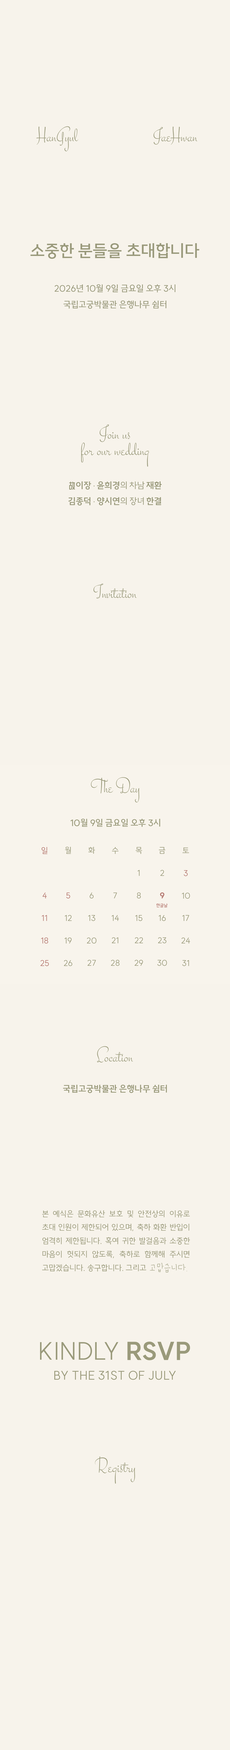
<style>
.page{position:relative;width:230px;height:1750px;background:#f7f3eb}
.page>*{position:absolute;margin:0}
.t1{font:20.3px "Stalemate-Regular";color:#99997b}
.t2{font:17.1px "SUITE-SemiBold";color:#99997b}
.t3{font:9px/16.2px "SUITE-Medium";color:#99997b}
.t4{font:20.3px/16.2px "Stalemate-Regular";color:#99997b}
.t5{font:9px/15.8px "SUITE-Bold";color:#99997b}
.t6{font:8.6px/15.8px "WD-XLLubrifontSC-Regular";color:#99997b}
.t7{font:7.2px/15.8px "WD-XLLubrifontSC-Regular";color:#99997b}
.t8{font:9px/15.8px "SUITE-Regular";color:#99997b}
.t9{font:20.3px "Stalemate-Regular";color:#9a9a7b}
.t10{font:9px "SUITE-SemiBold";color:#9a9a7b}
.t11{font:8.1px/22.5px "SUITE-Regular";color:#b57971}
.t12{font:8.1px/22.5px "SUITE-Regular";color:#9a9a7b}
.t13{font:8.1px/22.5px "SUITE-ExtraBold";color:#9a9a7b}
.t14{font:4.5px "SUITE-Regular";color:#a45a52}
.t15{font:9px "SUITE-Bold";color:#9a9a7b}
.t16{font:8.1px/13.5px "SUITE-Regular";color:#9a9a7b}
.t17{font:24.3px "SUITE-Light";color:#9a9a7b}
.t18{font:24.3px "SUITE-ExtraBold";color:#9a9a7b}
.t19{font:12.2px "SUITE-Regular";color:#9a9a7b}
</style>
<div class="page">
<p class="t1" style="left:36px;top:126px;width:161px;height:25px">HanGyul                      JaeHwan</p>
<p class="t2" style="left:30px;top:243px;width:169px;height:16px">소중한 분들을 초대합니다</p>
<p class="t3" style="left:54px;top:284px;width:121px;height:25px;text-align:center">2026년 10월 9일 금요일 오후 3시<br>국립고궁박물관 은행나무 쉼터</p>
<p class="t4" style="left:81px;top:424px;width:68px;height:43px;text-align:center">Join us<br>for our wedding</p>
<p class="t5" style="left:68px;top:481px;width:93px;height:25px;text-align:right"><span class="t6">故 </span>이장<span class="t7">・</span>윤희경<span class="t8">의 차남 </span>재환<br>김종덕<span class="t7">・</span>양시연<span class="t8">의 장녀 </span>한결</p>
<p class="t1" style="left:93px;top:584px;width:43px;height:15px">Invitation</p>
<p class="t9" style="left:91px;top:777px;width:48px;height:26px">The Day</p>
<p class="t10" style="left:70px;top:819px;width:90px;height:8px">10월 9일 금요일 오후 3시</p>
<p class="t11" style="left:40px;top:847px;width:9px;height:119px;text-align:center">일<br><br>4<br>11<br>18<br>25</p>
<p class="t12" style="left:64px;top:847px;width:8px;height:119px;text-align:center">월<br><br>5<br>12<br>19<br>26</p>
<p class="t12" style="left:87px;top:847px;width:9px;height:119px;text-align:center">화<br><br>6<br>13<br>20<br>27</p>
<p class="t12" style="left:111px;top:847px;width:8px;height:119px;text-align:center">수<br><br>7<br>14<br>21<br>28</p>
<p class="t12" style="left:134px;top:847px;width:9px;height:119px;text-align:center">목<br>1<br>8<br>15<br>22<br>29</p>
<p class="t12" style="left:157px;top:847px;width:10px;height:119px;text-align:center">금<br>2<br><span class="t13">9<br></span>16<br>23<br>30</p>
<p class="t12" style="left:181px;top:847px;width:9px;height:119px;text-align:center">토<br>3<br>10<br>17<br>24<br>31</p>
<p class="t14" style="left:156px;top:903px;width:11px;height:5px">한글날</p>
<p class="t9" style="left:97px;top:1046px;width:36px;height:17px">Location</p>
<p class="t15" style="left:63px;top:1085px;width:104px;height:8px">국립고궁박물관 은행나무 쉼터</p>
<p class="t16" style="left:42px;top:1210px;width:148px;height:62px;text-align:justify">본 예식은 문화유산 보호 및 안전상의 이유로 초대 인원이 제한되어 있으며, 축하 화환 반입이 엄격히 제한됩니다. 혹여 귀한 발걸음과 소중한 마음이 헛되지 않도록, 축하로 함께해 주시면 고맙겠습니다. 송구합니다. 그리고</p>
<p class="t17" style="left:40px;top:1342px;width:150px;height:18px">KINDLY <span class="t18">RSVP</span></p>
<p class="t19" style="left:54px;top:1371px;width:122px;height:9px">BY THE 31ST OF JULY</p>
<p class="t9" style="left:95px;top:1457px;width:40px;height:27px">Registry</p>
</div>
